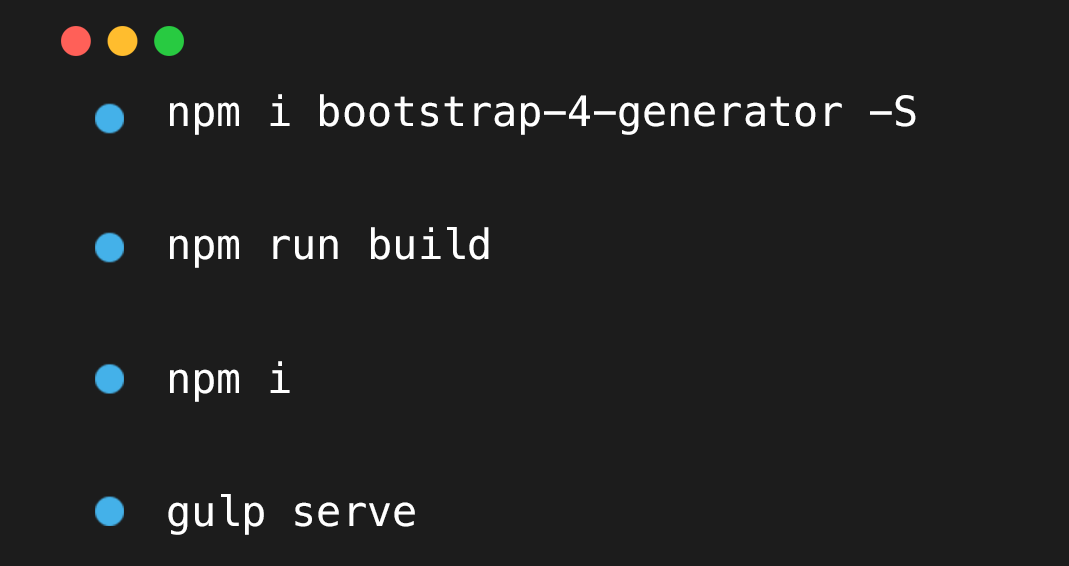
<style>
.page{position:relative;width:1069px;height:566px;background:#1c1c1c}
.page>*{position:absolute;margin:0}
.t1{font:41.6px/133.5px "Menlo-Regular";color:#ffffff}
</style>
<div class="page">
<p class="t1" style="left:168px;top:94px;width:748px;height:441px">npm i bootstrap-4-generator -S<br>npm run build<br>npm i<br>gulp serve</p>
</div>
